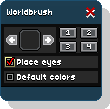
<style>
.page{position:relative;width:110px;height:109px;background:#1c3c4f}
.page>*{position:absolute;margin:0}
.t1{font:9px "Hobo";color:#ffffff;scale:0.9 1}
</style>
<div class="page">
<p class="t1" style="left:7px;top:9px;width:45px;height:6px">Worldbrush</p>
<p class="t1" style="left:17px;top:59px;width:44px;height:8px">Place eyes</p>
<p class="t1" style="left:17px;top:74px;width:58px;height:6px">Default colors</p>
</div>
